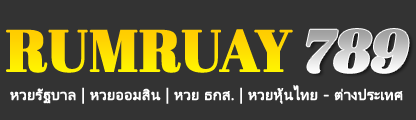
<style>
.page{position:relative;width:416px;height:120px;background:#333333}
.page>*{position:absolute;margin:0}
.t1{font:58px "AbrilFatface-Regular";color:#ffdf01;font-weight:bold}
.t2{font:58px "AbrilFatface-Regular";font-weight:bold;font-style:italic}
.t3{font:15.5px "LeelawadeeUI";color:#ffffff;font-weight:bold}
</style>
<div class="page">
<p class="t1" style="left:6px;top:29px;width:287px;height:44px">RUMRUAY</p>
<p class="t2" style="left:306px;top:29px;width:103px;height:44px">789</p>
<p class="t3" style="left:10px;top:85px;width:393px;height:19px">หวยรัฐบาล | หวยออมสิน | หวย ธกส. | หวยหุ้นไทย - ต่างประเทศ</p>
</div>
